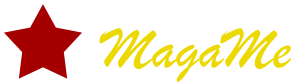
<style>
.page{position:relative;width:291px;height:82px;background:#ffffff}
.page>*{position:absolute;margin:0}
.t1{font:60px "BrushScriptMT";color:#ecd904}
</style>
<div class="page">
<p class="t1" style="left:99px;top:28px;width:192px;height:54px">MagaMe</p>
</div>
